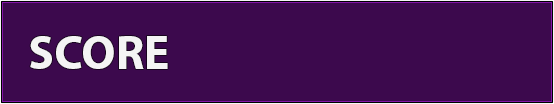
<style>
.page{position:relative;width:554px;height:104px;background:#3c094d}
.page>*{position:absolute;margin:0}
.t1{font:48px "MyriadHebrew-Bold";color:#f4f4f4}
.t2{font:48px "MyriadHebrew-Bold"}
</style>
<div class="page">
<p class="t1" style="left:30px;top:36px;width:138px;height:33px">SCORE</p>
<p class="t2" style="left:31px;top:36px;width:104px;height:33px">BEST</p>
</div>
